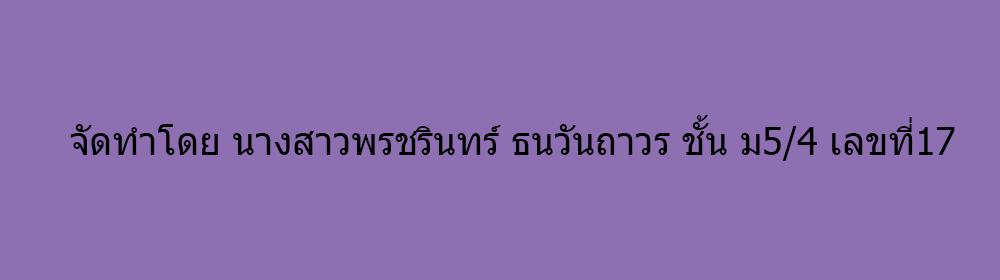
<style>
.page{position:relative;width:1000px;height:280px;background:#8e70b2}
.page>*{position:absolute;margin:0}
.t1{font:37.5px "Tahoma";color:#000000}
</style>
<div class="page">
<p class="t1" style="left:70px;top:115px;width:885px;height:46px">จัดทำโดย นางสาวพรชรินทร์ ธนวันถาวร ชั้น ม5/4 เลขที่17</p>
</div>
